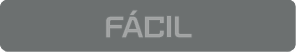
<style>
.page{position:relative;width:296px;height:52px;background:#6c7070}
.page>*{position:absolute;margin:0}
.t1{font:24px "KafuTechnoStd-HV";letter-spacing:0.024em;color:#a0a2a2}
</style>
<div class="page">
<p class="t1" style="left:106px;top:10px;width:86px;height:28px">FÁCIL</p>
</div>
